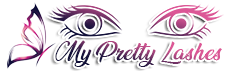
<style>
.page{position:relative;width:249px;height:71px;background:#ffffff}
.page>*{position:absolute;margin:0}
.t1{font:21.3px "AnandaBlackPersonalUse-Regular";letter-spacing:0.02em}
</style>
<div class="page">
<p class="t1" style="left:55px;top:40px;width:167px;height:27px">My Pretty Lashes</p>
</div>
